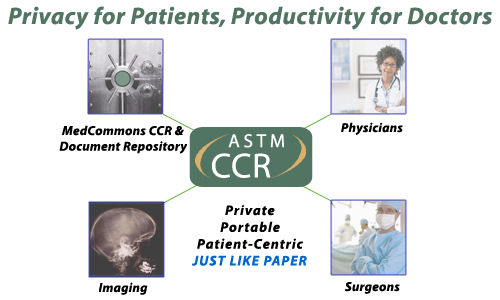
<style>
.page{position:relative;width:500px;height:300px;background:#ffffff}
.page>*{position:absolute;margin:0}
.t1{font:24px "Myriad-BoldItalic";letter-spacing:0.025em;color:#527463}
.t2{font:13px "Myriad-BoldItalic";letter-spacing:0.025em;color:#000000}
.t3{font:18.9px "Myriad-Roman";letter-spacing:0.2em;color:#ffffff}
.t4{font:35px "Myriad-Roman";letter-spacing:0.025em;color:#ffffff}
.t5{font:14px "Myriad-BoldItalic";letter-spacing:0.075em;color:#000000}
.t6{font:14px "Myriad-BoldItalic";letter-spacing:0.075em;color:#0066cc}
</style>
<div class="page">
<p class="t1" style="left:8px;top:6px;width:484px;height:24px">Privacy for Patients, Productivity for Doctors</p>
<p class="t2" style="left:59px;top:125px;width:128px;height:29px;text-align:center">MedCommons CCR &amp;<br>Document Repository</p>
<p class="t2" style="left:341px;top:122px;width:62px;height:13px">Physicians</p>
<p class="t3" style="left:228px;top:134px;width:56px;height:14px">ASTM</p>
<p class="t4" style="left:211px;top:148px;width:62px;height:38px">CCR</p>
<p class="t5" style="left:192px;top:204px;width:115px;height:62px;text-align:center">Private<br>Portable<br>Patient-Centric<br><span class="t6">JUST LIKE PAPER</span></p>
<p class="t2" style="left:99px;top:282px;width:49px;height:13px">Imaging</p>
<p class="t2" style="left:345px;top:282px;width:55px;height:12px">Surgeons</p>
</div>
